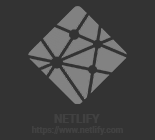
<style>
.page{position:relative;width:155px;height:140px;background:#333333}
.page>*{position:absolute;margin:0}
.t1{font:8.6px "Roboto-Black";color:#414141}
.t2{font:11.5px "Roboto-Black";color:#414141}
</style>
<div class="page">
<p class="t1" style="left:32px;top:126px;width:91px;height:9px">https://www.netlify.com</p>
<p class="t2" style="left:54px;top:114px;width:46px;height:9px">NETLIFY</p>
</div>
